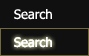
<style>
.page{position:relative;width:89px;height:56px;background:#101010}
.page>*{position:absolute;margin:0}
.t1{font:13px "Tahoma";color:#ffffff}
</style>
<div class="page">
<p class="t1" style="left:14px;top:9px;width:38px;height:11px">Search</p>
<p class="t1" style="left:14px;top:37px;width:38px;height:11px">Search</p>
<p class="t1" style="left:14px;top:37px;width:38px;height:11px">Search</p>
</div>
